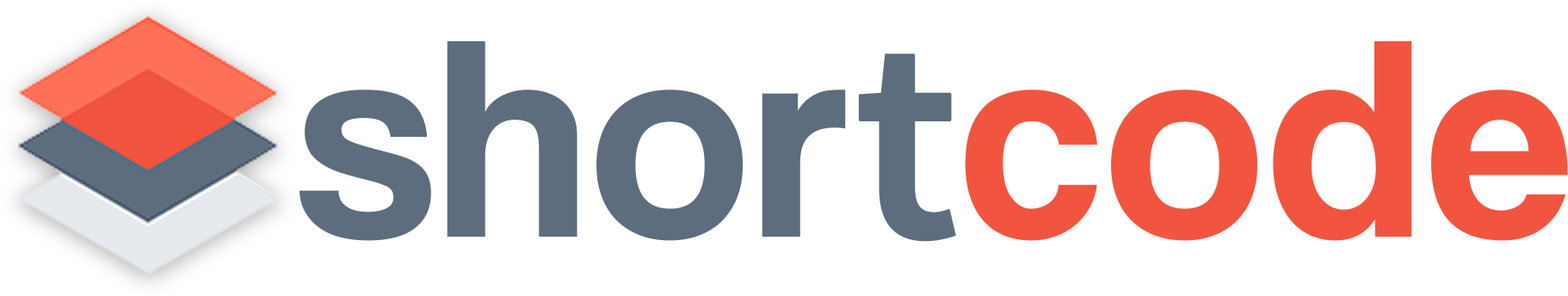
<style>
.page{position:relative;width:1568px;height:296px;background:#ffffff}
.page>*{position:absolute;margin:0}
.t1{font:291.2px "CoolveticaRg-Regular";letter-spacing:0.02em;color:#5d6d7e}
.t2{font:291.2px "SourceSansPro-Semibold";letter-spacing:-0.02em;color:#5d6d7e;font-weight:bold}
.t3{font:291.2px "CoolveticaRg-Regular";letter-spacing:0.02em;color:#f15540}
</style>
<div class="page">
<p class="t1" style="left:299px;top:40px;width:1269px;height:202px">shor<span class="t2">t</span><span class="t3">code</span></p>
</div>
